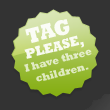
<style>
.page{position:relative;width:110px;height:110px;background:#333333}
.page>*{position:absolute;margin:0}
.t1{font:14px/14px "Rockwell-ExtraBold";letter-spacing:-0.005em;color:#ffffff;scale:0.9 1}
.t2{font:22px/14px "Rockwell-ExtraBold";letter-spacing:-0.005em;color:#ffffff;scale:0.9 1}
.t3{font:11px "Rockwell-ExtraBold";letter-spacing:-0.005em;color:#dfeac1;scale:0.9 1}
</style>
<div class="page">
<p class="t1" style="left:24px;top:19px;width:60px;height:40px;text-align:center;rotate:-14deg;opacity:0.9"><span class="t2">TAG<br></span> PLEASE,</p>
<p class="t3" style="left:24px;top:49px;width:68px;height:33px;text-align:center;rotate:-14deg">I have three<br>children.</p>
</div>
